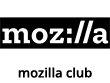
<style>
.page{position:relative;width:110px;height:83px;background:#ffffff}
.page>*{position:absolute;margin:0}
.t1{font:13px "OpenSans-Semibold";color:#000000}
</style>
<div class="page">
<p class="t1" style="left:18px;top:67px;width:74px;height:11px">mozilla club</p>
</div>
